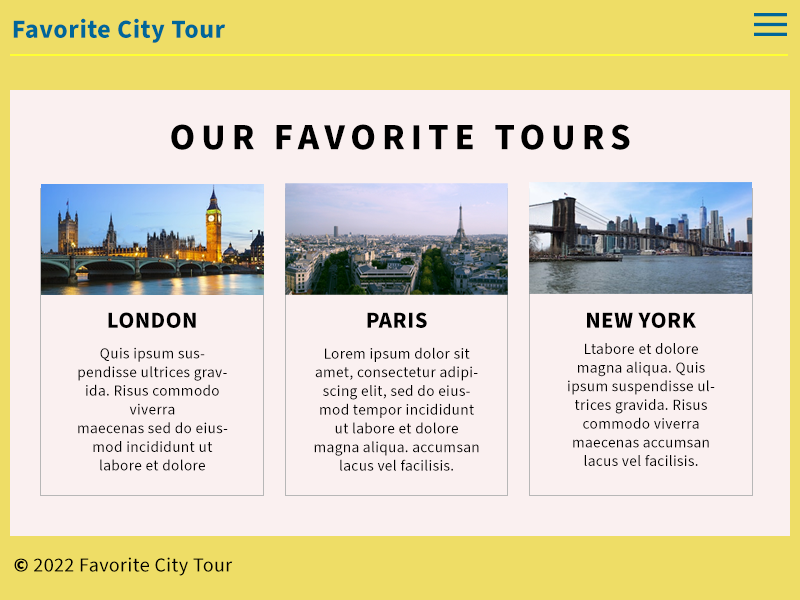
<style>
.page{position:relative;width:800px;height:600px;background:#faf0f0}
.page>*{position:absolute;margin:0}
.t1{font:26px "SourceSansPro-Bold";letter-spacing:0.02em;color:#006699}
.t2{font:37px "SourceSansPro-Bold";letter-spacing:0.16em;color:#000000}
.t3{font:23px "SourceSansPro-Bold";letter-spacing:0.02em;color:#000000}
.t4{font:15.4px/18.7px "SourceSansPro-Regular";letter-spacing:0.02em;color:#000000}
.t5{font:20px "SourceSansPro-Regular";letter-spacing:0.02em;color:#000000}
.t6{font:20px "SourceSansPro-Black";letter-spacing:0.02em;color:#000000}
</style>
<div class="page">
<p class="t1" style="left:13px;top:18px;width:212px;height:25px">Favorite City Tour</p>
<p class="t2" style="left:171px;top:124px;width:459px;height:26px">OUR FAVORITE TOURS</p>
<p class="t3" style="left:108px;top:312px;width:88px;height:16px">LONDON</p>
<p class="t3" style="left:367px;top:312px;width:60px;height:16px">PARIS</p>
<p class="t3" style="left:587px;top:312px;width:109px;height:16px">NEW YORK</p>
<p class="t4" style="left:78px;top:347px;width:150px;height:124px;text-align:center">Quis ipsum suspendisse ultrices gravida. Risus commodo viverra <br>maecenas sed do eiusmod incididunt ut labore et dolore magna</p>
<p class="t4" style="left:314px;top:347px;width:165px;height:124px;text-align:center">Lorem ipsum dolor sit amet, consectetur adipiscing elit, sed do eiusmod tempor incididunt ut labore et dolore magna aliqua. accumsan lacus vel facilisis.</p>
<p class="t4" style="left:568px;top:343px;width:147px;height:123px;text-align:center">Ltabore et dolore magna aliqua. Quis ipsum suspendisse ultrices gravida. Risus commodo viverra maecenas accumsan lacus vel facilisis.</p>
<p class="t5" style="left:14px;top:557px;width:219px;height:19px"><span class="t6">©</span> 2022 Favorite City Tour</p>
</div>
